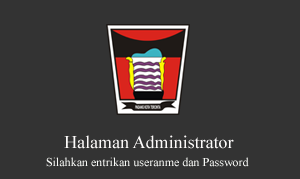
<style>
.page{position:relative;width:300px;height:179px;background:#333333}
.page>*{position:absolute;margin:0}
.t1{font:18px "TimesNewRomanPSMT";color:#fdfbfa}
.t2{font:12px "TimesNewRomanPSMT";color:#f9faf7}
</style>
<div class="page">
<p class="t1" style="left:64px;top:135px;width:170px;height:14px">Halaman Administrator</p>
<p class="t2" style="left:46px;top:157px;width:203px;height:10px">Silahkan entrikan useranme dan Password</p>
</div>
